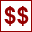
<style>
.page{position:relative;width:32px;height:32px;background:#ffffff}
.page>*{position:absolute;margin:0}
.t1{font:23px "Arial-BoldMT";color:#950000}
</style>
<div class="page">
<p class="t1" style="left:4px;top:6px;width:25px;height:20px">$$</p>
</div>
